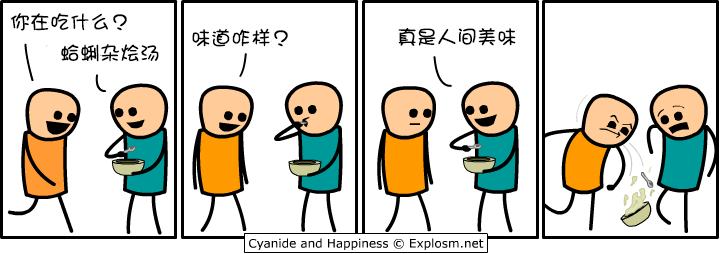
<style>
.page{position:relative;width:720px;height:254px;background:#ffffff}
.page>*{position:absolute;margin:0}
.t1{font:20px "DFGirl";color:#000000}
</style>
<div class="page">
<p class="t1" style="left:10px;top:13px;width:117px;height:18px">你在吃什么？</p>
<p class="t1" style="left:192px;top:28px;width:96px;height:19px">味道咋样？</p>
<p class="t1" style="left:398px;top:27px;width:118px;height:19px">真是人间美味</p>
<p class="t1" style="left:61px;top:44px;width:98px;height:18px">蛤蜊杂烩汤</p>
</div>
